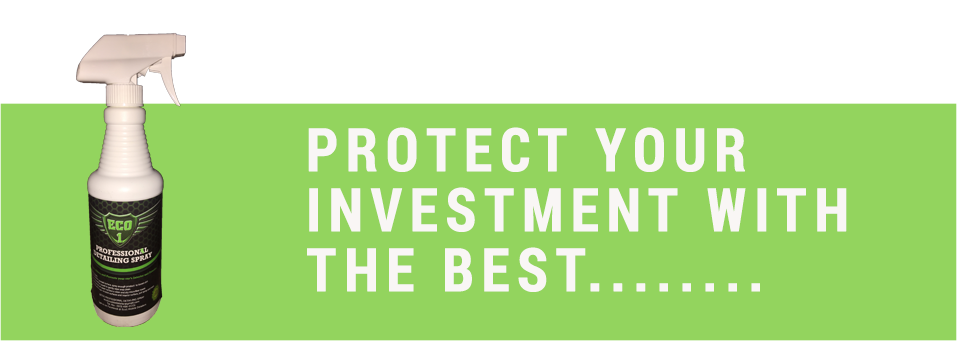
<style>
.page{position:relative;width:960px;height:345px;background:#93d45e}
.page>*{position:absolute;margin:0}
.t1{font:60px/30px "RobotoCondensed-Bold";letter-spacing:0.1em;color:#f9f6f5;font-weight:bold}
</style>
<div class="page">
<p class="t1" style="left:307px;top:127px;width:540px;height:165px">PROTECT YOUR <br><br>INVESTMENT WITH <br><br>THE BEST........</p>
</div>
